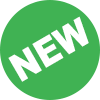
<style>
.page{position:relative;width:100px;height:100px;background:#40b253}
.page>*{position:absolute;margin:0}
.t1{font:38.3px "Arial-Black";color:#ffffff;scale:0.87 1}
</style>
<div class="page">
<p class="t1" style="left:8px;top:16px;width:81px;height:66px;rotate:-30deg">NEW</p>
</div>
